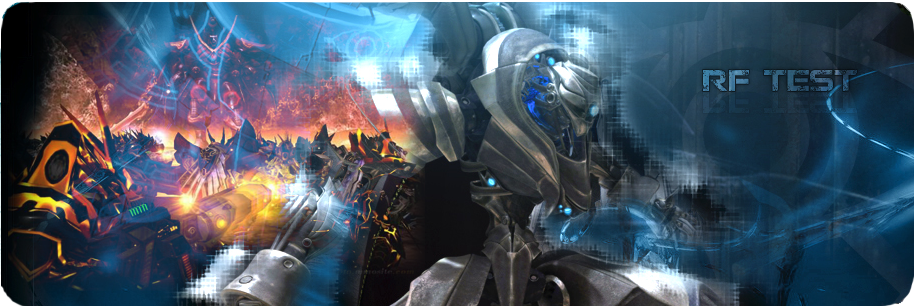
<style>
.page{position:relative;width:915px;height:307px}
.page>*{position:absolute;margin:0}
.t1{font:30px "JacintoSans";scale:0.91 1}
</style>
<div class="page">
<p class="t1" style="left:703px;top:69px;width:154px;height:22px">RF TEST</p>
</div>
